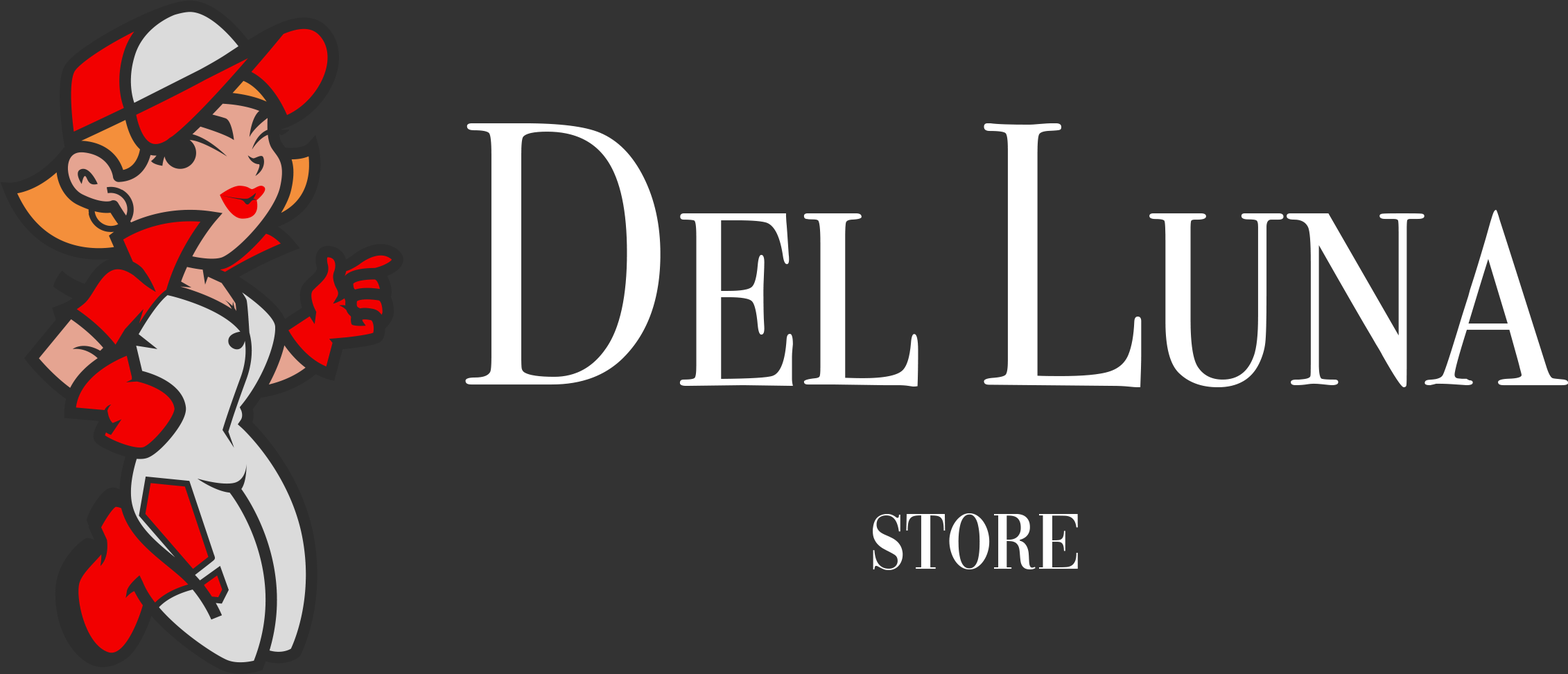
<style>
.page{position:relative;width:1568px;height:674px;background:#333333}
.page>*{position:absolute;margin:0}
.t1{font:376.4px "BodoniSvtyTwoSCITCTT-Book";color:#ffffff;scale:0.79 1}
.t2{font:81.7px "Vogue-Regular";color:#ffffff;scale:0.95 1}
</style>
<div class="page">
<p class="t1" style="left:465px;top:123px;width:1104px;height:264px">Del Luna</p>
<p class="t2" style="left:873px;top:514px;width:205px;height:56px">Store</p>
</div>
